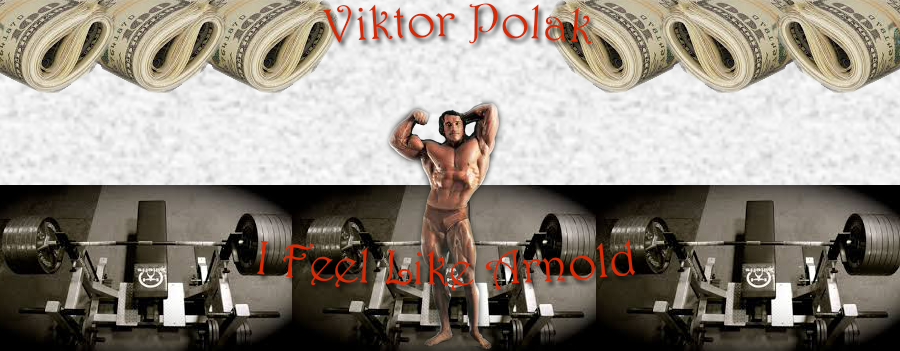
<style>
.page{position:relative;width:900px;height:351px}
.page>*{position:absolute;margin:0}
.t1{font:48px "Harrington";color:#d32a08}
</style>
<div class="page">
<p class="t1" style="left:323px;top:3px;width:269px;height:41px">Viktor Polak</p>
<p class="t1" style="left:257px;top:239px;width:378px;height:52px">I Feel Like Arnold</p>
</div>
